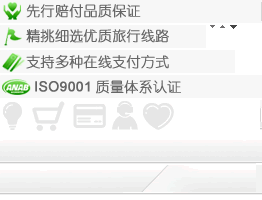
<style>
.page{position:relative;width:262px;height:200px;background:#f7f7f7}
.page>*{position:absolute;margin:0}
.t1{font:14px "YouYuan";color:#666666;font-weight:bold}
.t2{font:14px "ArialMT";color:#666666;font-weight:bold}
</style>
<div class="page">
<p class="t1" style="left:26px;top:4px;width:115px;height:14px">先行赔付品质保证</p>
<p class="t1" style="left:26px;top:29px;width:143px;height:14px">精挑细选优质旅行线路</p>
<p class="t1" style="left:26px;top:55px;width:143px;height:14px">支持多种在线支付方式</p>
<p class="t2" style="left:35px;top:80px;width:146px;height:14px">ISO9001<span class="t1">质量体系认证</span></p>
</div>
